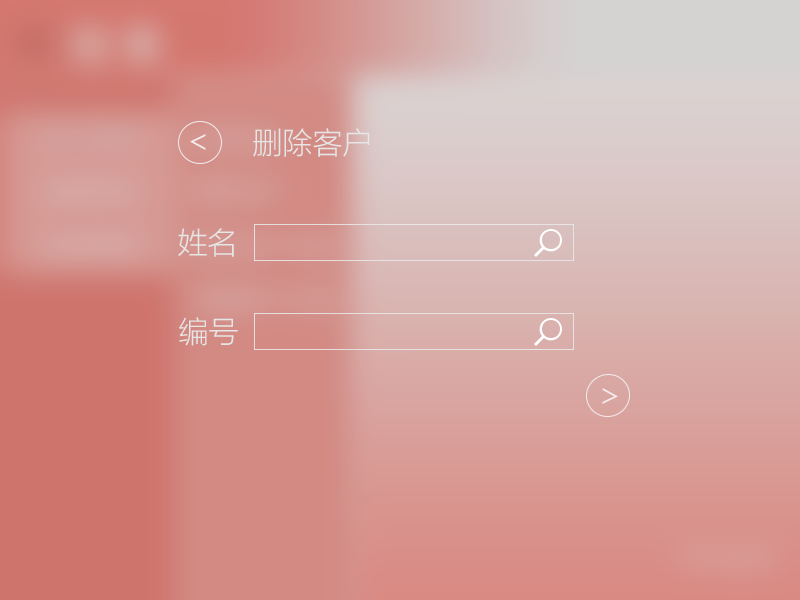
<style>
.page{position:relative;width:800px;height:600px}
.page>*{position:absolute;margin:0}
.t1{font:30px "MicrosoftYaHeiLight";color:#e6e6e6}
</style>
<div class="page">
<p class="t1" style="left:253px;top:128px;width:117px;height:29px">删除客户</p>
<p class="t1" style="left:178px;top:228px;width:56px;height:29px">姓名</p>
<p class="t1" style="left:179px;top:317px;width:59px;height:29px">编号</p>
</div>
